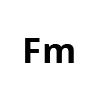
<style>
.page{position:relative;width:100px;height:100px;background:#ffffff}
.page>*{position:absolute;margin:0}
.t1{font:35px "OpenSans-Bold";color:#000000}
</style>
<div class="page">
<p class="t1" style="left:25px;top:38px;width:49px;height:25px">Fm</p>
</div>
